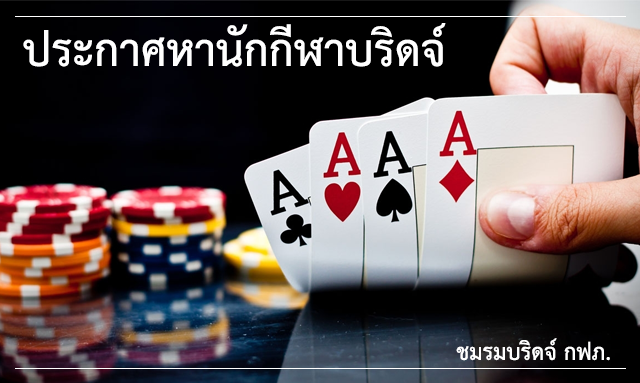
<style>
.page{position:relative;width:640px;height:383px}
.page>*{position:absolute;margin:0}
.t1{font:64px "THSarabunNew-Bold";color:#ffffff}
.t2{font:32px "THSarabunNew-Bold";color:#ffffff}
</style>
<div class="page">
<p class="t1" style="left:23px;top:23px;width:423px;height:44px">ประกาศหานักกีฬาบริดจ์</p>
<p class="t2" style="left:456px;top:338px;width:154px;height:23px">ชมรมบริดจ์ กฟภ.</p>
</div>
